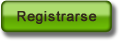
<style>
.page{position:relative;width:121px;height:41px}
.page>*{position:absolute;margin:0}
.t1{font:13.9px "ArialMT";letter-spacing:0.05em;color:#332a1b;font-weight:bold}
</style>
<div class="page">
<p class="t1" style="left:17px;top:11px;width:80px;height:13px">Registrarse</p>
</div>
